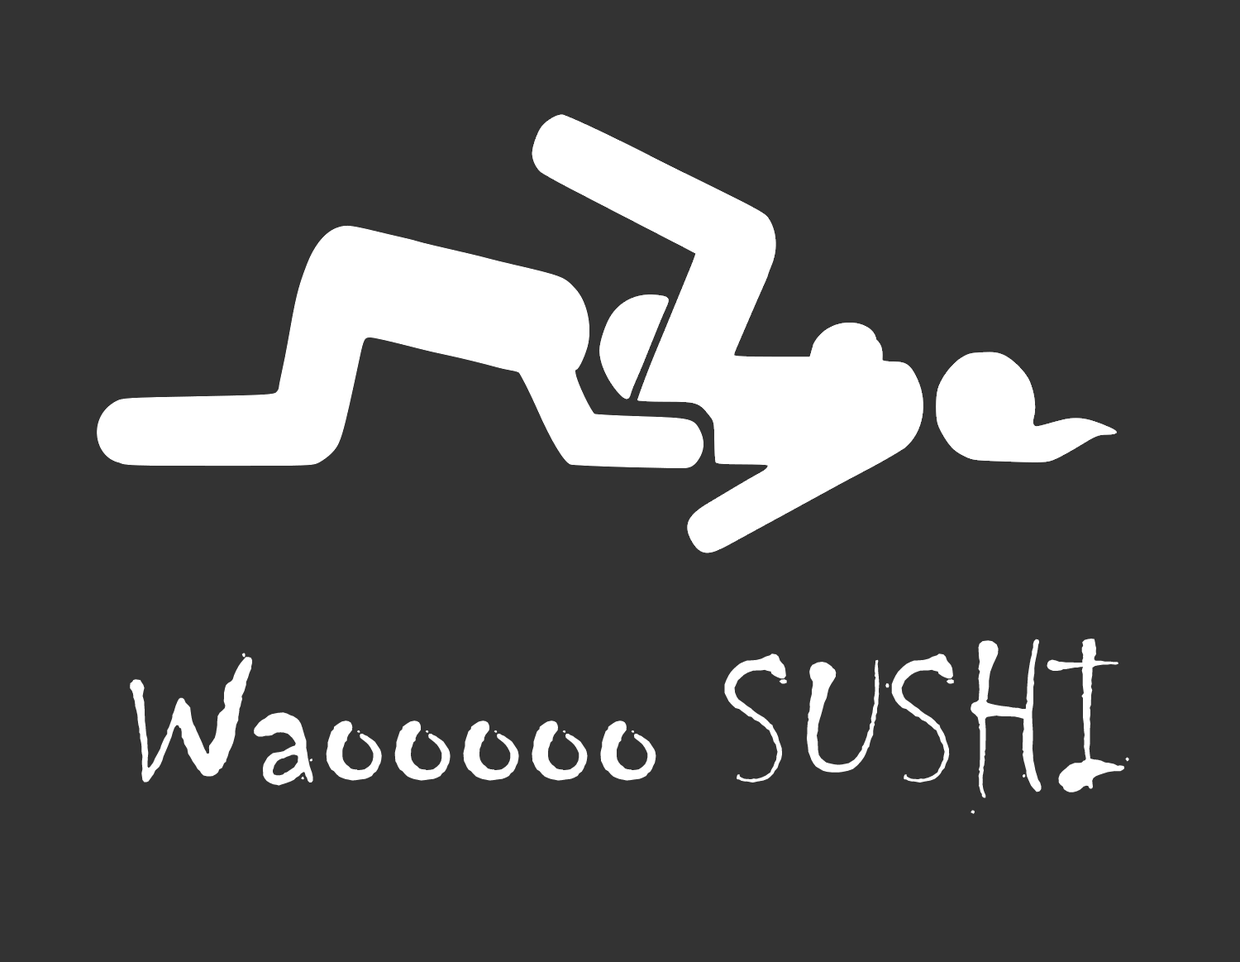
<style>
.page{position:relative;width:1240px;height:962px;background:#333333}
.page>*{position:absolute;margin:0}
.t1{font:217px "Chiller-Regular";color:#ffffff}
</style>
<div class="page">
<p class="t1" style="left:130px;top:638px;width:999px;height:176px">Waooooo SUSHI</p>
</div>
